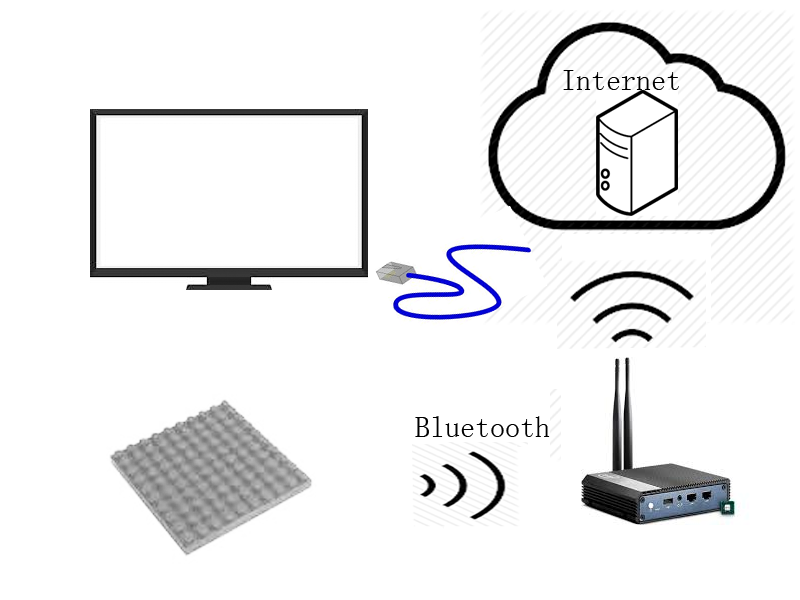
<style>
.page{position:relative;width:800px;height:600px;background:#ffffff}
.page>*{position:absolute;margin:0}
.t1{font:30px "SimSun";color:#000000}
</style>
<div class="page">
<p class="t1" style="left:563px;top:70px;width:116px;height:20px">Internet</p>
<p class="t1" style="left:415px;top:416px;width:135px;height:21px">Bluetooth</p>
</div>
